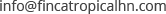
<style>
.page{position:relative;width:166px;height:14px;background:#ffffff}
.page>*{position:absolute;margin:0}
.t1{font:14px "OpenSans";color:#444444}
</style>
<div class="page">
<p class="t1" style="left:0px;top:0px;width:166px;height:14px">info@fincatropicalhn.com</p>
</div>
